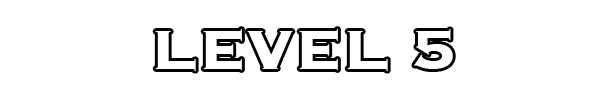
<style>
.page{position:relative;width:598px;height:100px;background:#ffffff}
.page>*{position:absolute;margin:0}
.t1{font:72px "Copperplate-Bold";color:#ffffff}
</style>
<div class="page">
<p class="t1" style="left:155px;top:29px;width:298px;height:42px">LEVEL 5</p>
</div>
